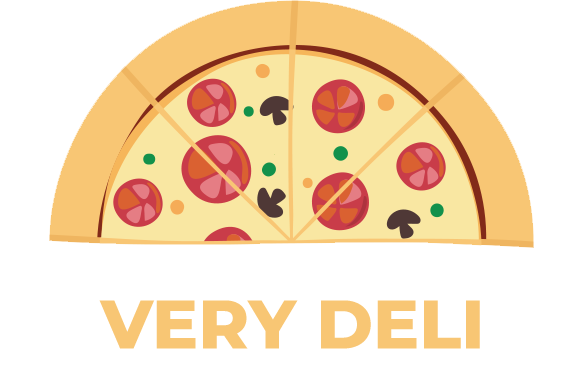
<style>
.page{position:relative;width:583px;height:389px;background:#ffffff}
.page>*{position:absolute;margin:0}
.t1{font:68.7px "Montserrat-ExtraBold";color:#f8c674}
</style>
<div class="page">
<p class="t1" style="left:99px;top:300px;width:381px;height:49px">VERY DELI</p>
</div>
